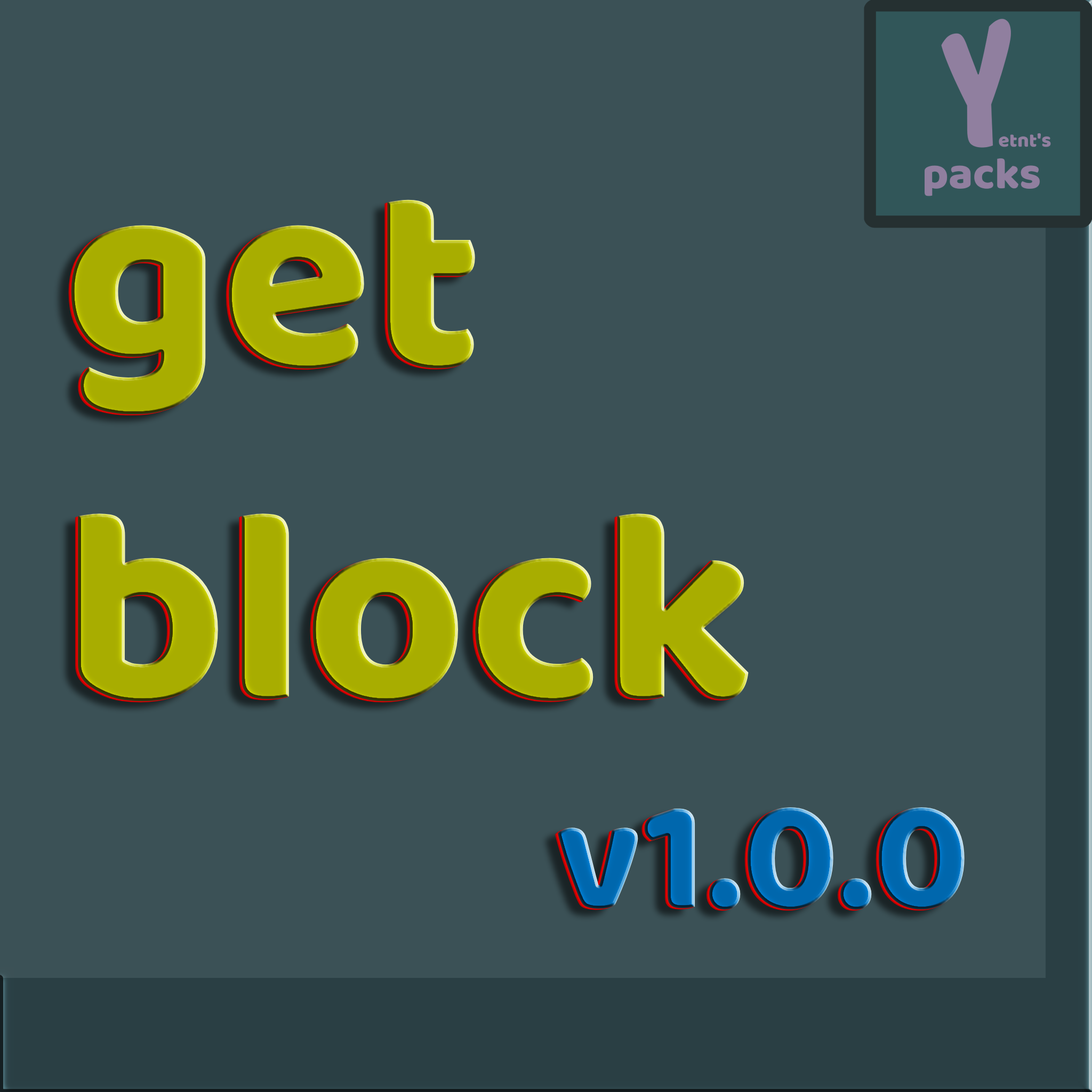
<style>
.page{position:relative;width:1092px;height:1092px;background:#3b5156}
.page>*{position:absolute;margin:0}
.t1{font:277.3px "Baloo";color:#a8ad00}
.t2{font:160px "Baloo"}
</style>
<div class="page">
<p class="t1" style="left:71px;top:199px;width:678px;height:503px">get <br>block</p>
<p class="t2" style="left:558px;top:807px;width:407px;height:103px">v1.0.0</p>
</div>
